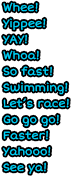
<style>
.page{position:relative;width:80px;height:176px;background:#ffffff}
.page>*{position:absolute;margin:0}
.t1{font:11px/16px "ShortStack";color:#00d8ff}
</style>
<div class="page">
<p class="t1" style="left:3px;top:2px;width:66px;height:172px">Whee!<br>Yippee!<br>YAY!<br>Whoa!<br>So fast!<br>Swimming!<br>Let’s race!<br>Go go go!<br>Faster!<br>Yahooo!<br>See ya!</p>
</div>
